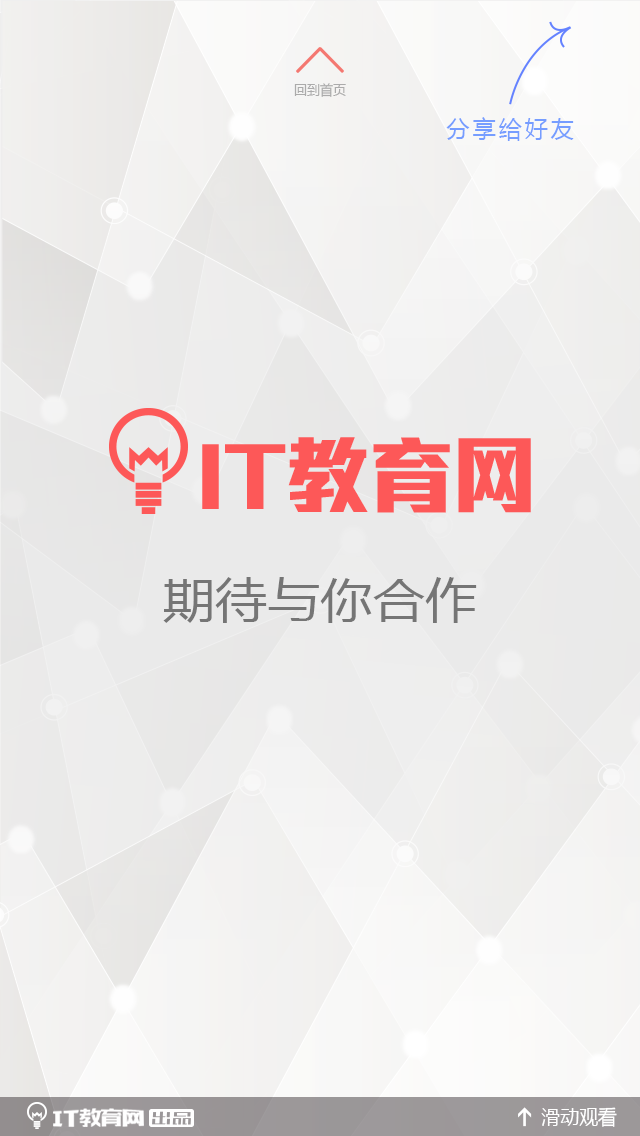
<style>
.page{position:relative;width:640px;height:1136px}
.page>*{position:absolute;margin:0}
.t1{font:14px "MicrosoftYaHei";color:#ababab;scale:0.93 1}
.t2{font:22.8px "MicrosoftYaHei";letter-spacing:0.14em;color:#769dff}
.t3{font:84.9px "MStiffHeiPRC-UltraBold";letter-spacing:-0.013em;color:#fd5858}
.t4{font:47.3px "MicrosoftYaHei";color:#757575;scale:1.11 1}
.t5{font:20.2px "MicrosoftYaHei";color:#ffffff;scale:0.94 1}
</style>
<div class="page">
<p class="t1" style="left:294px;top:83px;width:52px;height:14px">回到首页</p>
<p class="t2" style="left:446px;top:117px;width:128px;height:24px">分享给好友</p>
<p class="t3" style="left:202px;top:437px;width:329px;height:76px">IT教育网</p>
<p class="t4" style="left:163px;top:577px;width:314px;height:46px">期待与你合作</p>
<p class="t5" style="left:541px;top:1107px;width:76px;height:20px">滑动观看</p>
</div>
